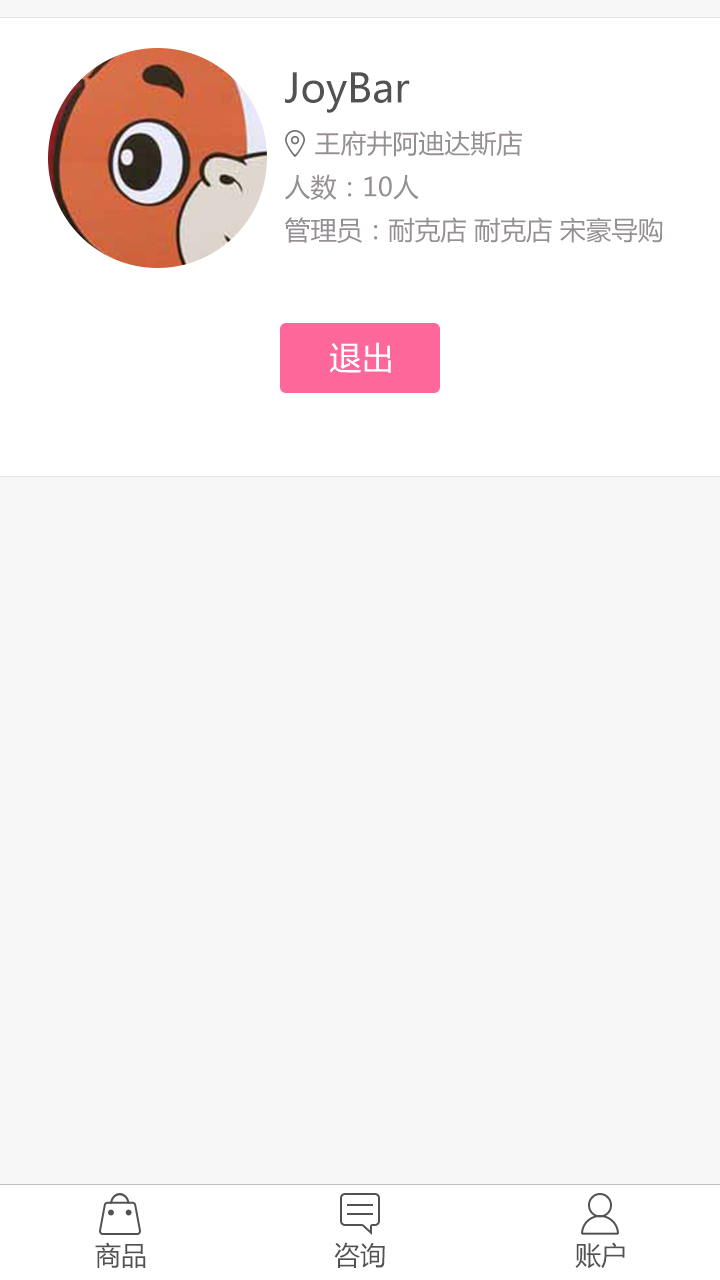
<style>
.page{position:relative;width:720px;height:1280px;background:#f7f7f7}
.page>*{position:absolute;margin:0}
.t1{font:40px "MicrosoftYaHei";color:#525252}
.t2{font:26px "MicrosoftYaHei";color:#958f93}
.t3{font:32px "MicrosoftYaHei";letter-spacing:0.01em;color:#ffffff}
.t4{font:26px "MicrosoftYaHei";color:#525252}
</style>
<div class="page">
<p class="t1" style="left:285px;top:72px;width:125px;height:41px">JoyBar</p>
<p class="t2" style="left:315px;top:130px;width:207px;height:27px">王府井阿迪达斯店</p>
<p class="t2" style="left:285px;top:174px;width:134px;height:26px">人数：10人</p>
<p class="t2" style="left:285px;top:217px;width:378px;height:26px">管理员：耐克店 耐克店 宋豪导购</p>
<p class="t3" style="left:330px;top:342px;width:61px;height:31px">退出</p>
<p class="t4" style="left:95px;top:1242px;width:51px;height:26px">商品</p>
<p class="t4" style="left:334px;top:1242px;width:51px;height:26px">咨询</p>
<p class="t4" style="left:575px;top:1242px;width:50px;height:27px">账户</p>
</div>
